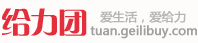
<style>
.page{position:relative;width:198px;height:43px;background:#fefbfb}
.page>*{position:absolute;margin:0}
.t1{font:30px "FZCQK--GBK1-0";letter-spacing:-0.05em;color:#e32f3c}
.t2{font:12px "MicrosoftYaHei";color:#b6b6b6;font-weight:bold}
.t3{font:12px "MicrosoftYaHei";color:#a0a0a0;font-weight:bold}
</style>
<div class="page">
<p class="t1" style="left:2px;top:8px;width:85px;height:28px">给力团</p>
<p class="t2" style="left:100px;top:11px;width:86px;height:12px">爱生活，爱给力</p>
<p class="t3" style="left:90px;top:25px;width:107px;height:14px">tuan.geilibuy.com</p>
</div>
